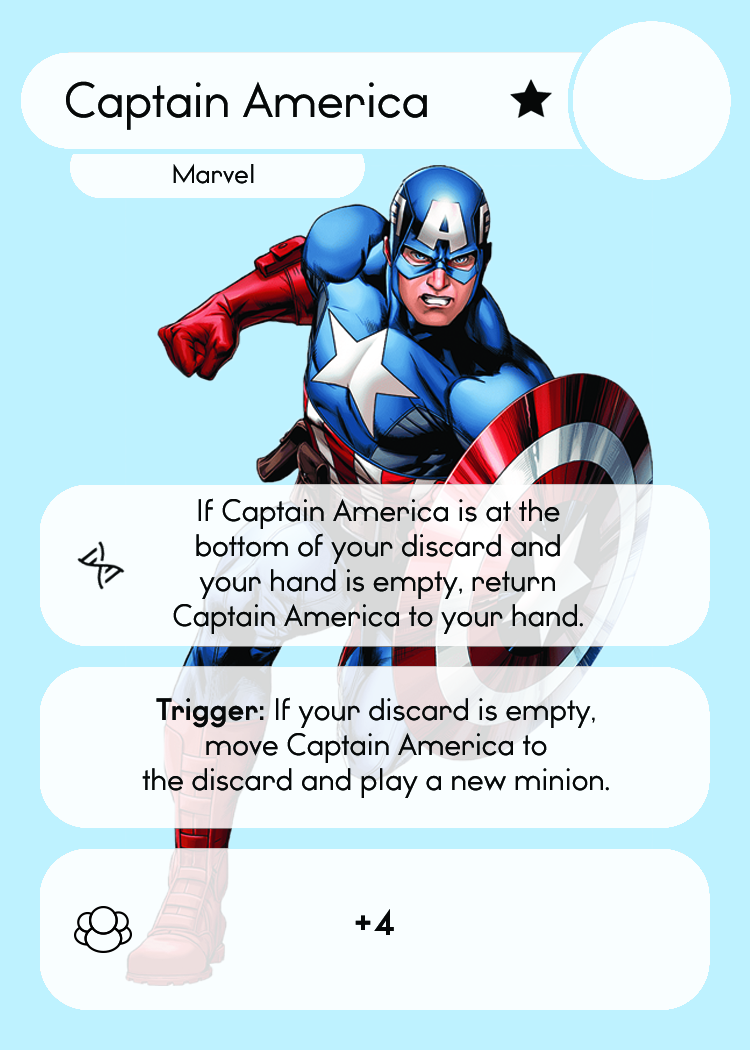
<style>
.page{position:relative;width:750px;height:1050px;background:#bef2ff}
.page>*{position:absolute;margin:0}
.t1{font:46.7px "WatchwordRegularDemo";color:#060808}
.t2{font:25.5px "WatchwordRegularDemo";color:#060808}
.t3{font:29.2px "WatchwordRegularDemo";color:#060808}
.t4{font:29.2px "Dosis-Medium";color:#060808}
.t5{font:29.2px "WatchwordBoldDemo";color:#060808}
.t6{font:33.9px "WatchwordBoldDemo";color:#060808}
</style>
<div class="page">
<p class="t1" style="left:66px;top:81px;width:361px;height:49px">Captain America</p>
<p class="t2" style="left:173px;top:163px;width:81px;height:21px">Marvel</p>
<p class="t3" style="left:173px;top:498px;width:410px;height:136px;text-align:center">If Captain America is at the<br>bottom of your discard and<br>your hand is empty, return<br>Captain America to your hand<span class="t4">.</span></p>
<p class="t3" style="left:142px;top:697px;width:467px;height:101px;text-align:center"><span class="t5">Trigger: </span>If your discard is empty,<br>move Captain America to<br>the discard and play a new minion<span class="t4">.</span></p>
<p class="t6" style="left:355px;top:909px;width:39px;height:26px">+4</p>
</div>
